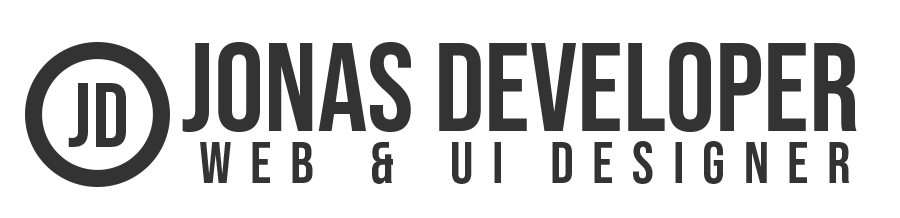
<style>
.page{position:relative;width:900px;height:218px;background:#ffffff}
.page>*{position:absolute;margin:0}
.t1{font:125px "BebasNeue-Regular";color:#333333}
.t2{font:91.2px "BebasNeue-Regular";color:#333333}
.t3{font:58.3px "BebasNeue-Regular";color:#333333}
</style>
<div class="page">
<p class="t1" style="left:182px;top:42px;width:675px;height:90px">Jonas Developer</p>
<p class="t2" style="left:68px;top:83px;width:58px;height:64px">JD</p>
<p class="t3" style="left:200px;top:141px;width:650px;height:43px">w  e  b      &amp;      U  I     D  E  S  I  G  N  E  R</p>
</div>
